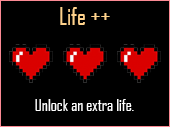
<style>
.page{position:relative;width:170px;height:127px;background:#000000}
.page>*{position:absolute;margin:0}
.t1{font:24px "AgencyFB-Reg";color:#ffd28c}
.t2{font:16px "AgencyFB-Reg";color:#ffffff}
</style>
<div class="page">
<p class="t1" style="left:60px;top:7px;width:50px;height:18px">Life ++</p>
<p class="t2" style="left:35px;top:99px;width:99px;height:12px">Unlock an extra life.</p>
</div>
